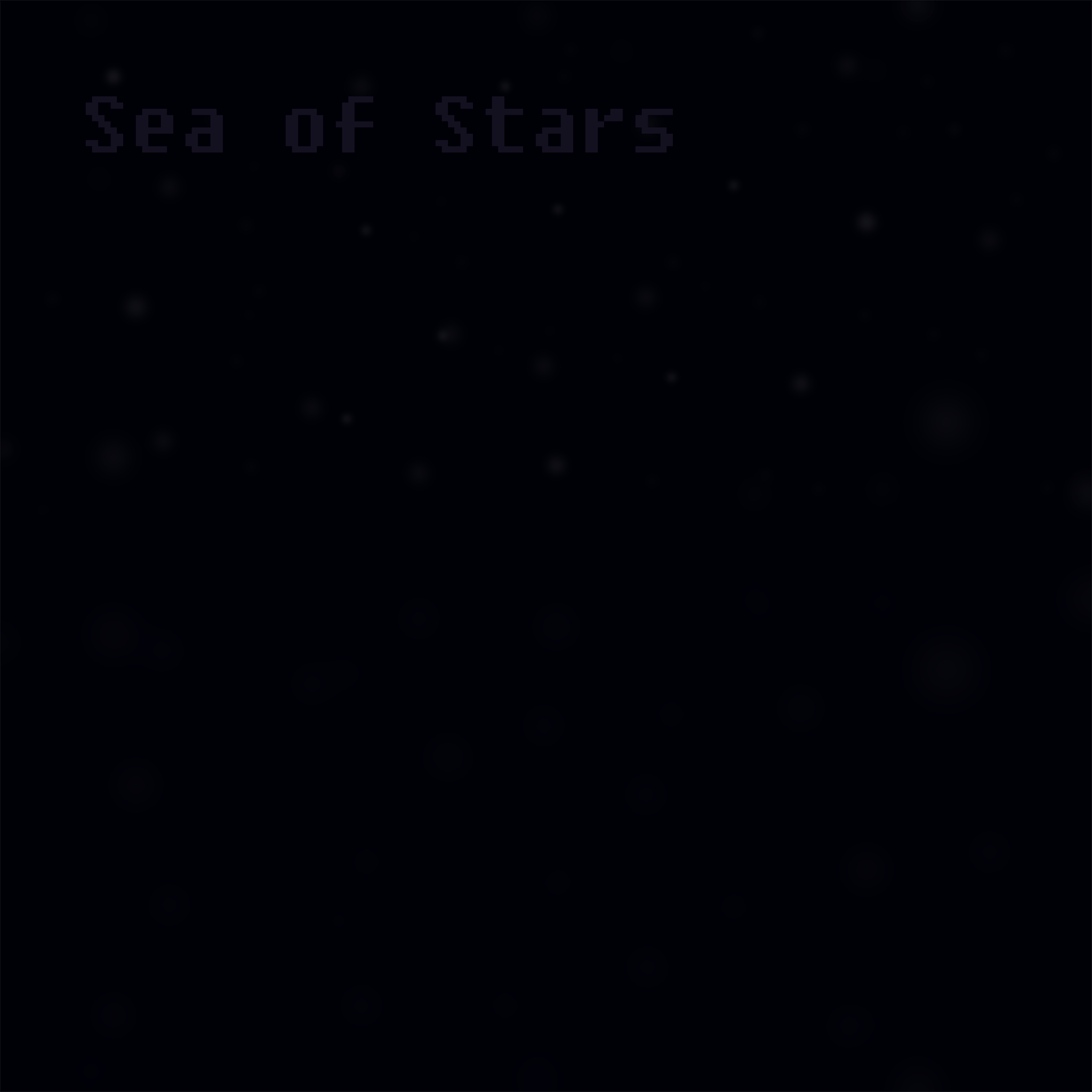
<style>
.page{position:relative;width:1092px;height:1092px;background:#000007}
.page>*{position:absolute;margin:0}
.t1{font:80px "Fixedsys";color:#13101f}
</style>
<div class="page">
<p class="t1" style="left:85px;top:96px;width:588px;height:56px">Sea of Stars</p>
</div>
